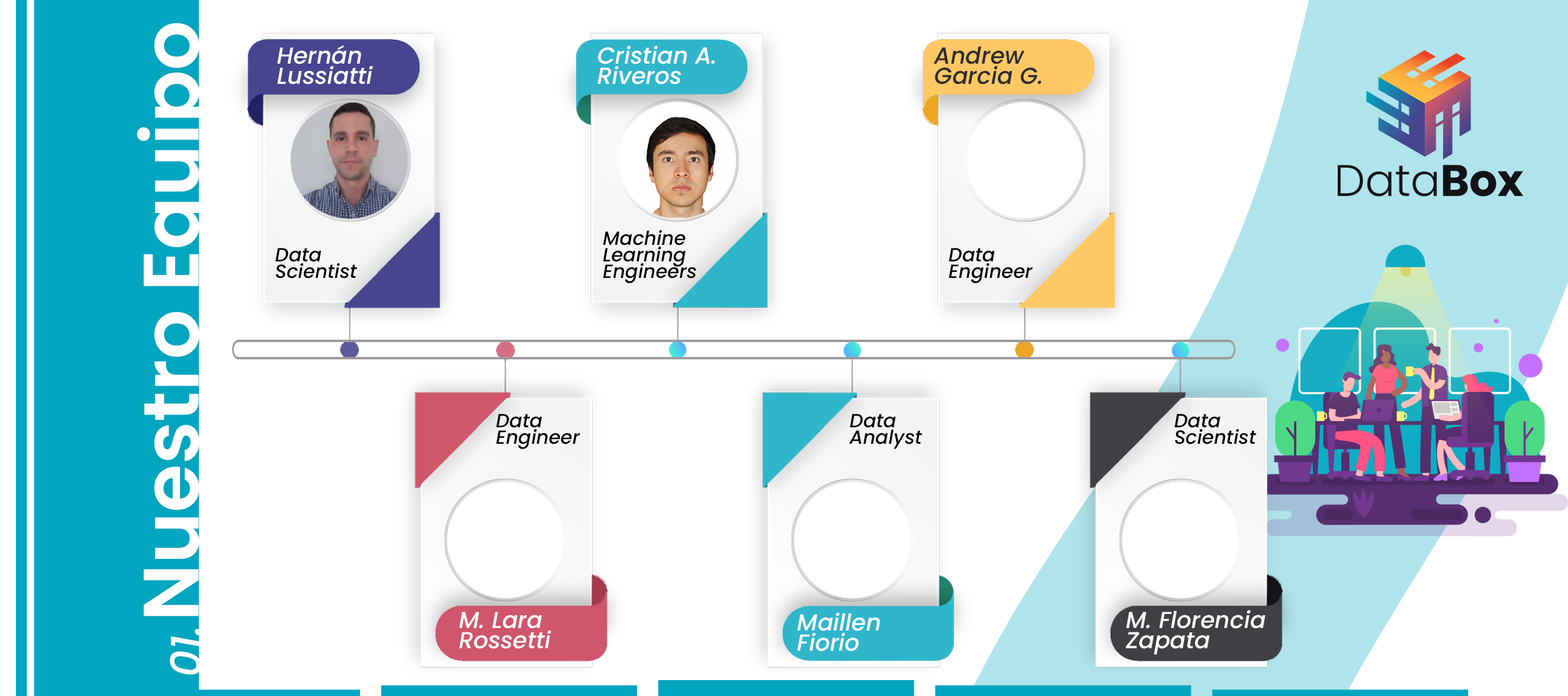
<style>
.page{position:relative;width:1568px;height:696px;background:#ffffff}
.page>*{position:absolute;margin:0}
.t1{font:78.2px "Poppins-SemiBold";color:#ffffff}
.t2{font:23.2px/20.3px "Poppins-MediumItalic";color:#ffffff}
.t3{font:23.2px/20.3px "Poppins-MediumItalic";color:#282828}
.t4{font:19.1px/16.8px "Poppins-MediumItalic";color:#000000}
.t5{font:42.1px "Poppins-MediumItalic";color:#ffffff}
</style>
<div class="page">
<p class="t1" style="left:137px;top:23px;width:82px;height:594px">Nuestro Equipo</p>
<p class="t2" style="left:277px;top:45px;width:96px;height:40px">Hernán <br>Lussiatti</p>
<p class="t2" style="left:598px;top:45px;width:117px;height:40px">Cristian A.<br>Riveros</p>
<p class="t3" style="left:933px;top:47px;width:108px;height:38px">Andrew <br>Garcia G.</p>
<p class="t4" style="left:603px;top:230px;width:93px;height:54px">Machine <br>Learning <br>Engineers</p>
<p class="t4" style="left:275px;top:248px;width:82px;height:31px">Data <br>Scientist</p>
<p class="t4" style="left:949px;top:248px;width:84px;height:36px">Data <br>Engineer</p>
<p class="t4" style="left:496px;top:414px;width:84px;height:36px">Data <br>Engineer</p>
<p class="t4" style="left:849px;top:414px;width:73px;height:35px">Data <br>Analyst</p>
<p class="t4" style="left:1174px;top:414px;width:82px;height:31px">Data <br>Scientist</p>
<p class="t2" style="left:459px;top:612px;width:92px;height:37px">M. Lara <br>Rossetti</p>
<p class="t2" style="left:797px;top:612px;width:83px;height:40px">Maillen<br>Fiorio</p>
<p class="t2" style="left:1126px;top:610px;width:139px;height:45px">M. Florencia <br>Zapata</p>
<p class="t5" style="left:170px;top:629px;width:32px;height:46px">01.</p>
</div>
